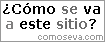
<style>
.page{position:relative;width:105px;height:42px;background:#ffffff}
.page>*{position:absolute;margin:0}
.t1{font:14px/15px "Verdana-Bold";color:#000000}
.t2{font:14px/15px "Verdana-Bold";color:#6c6c6c}
.t3{font:14px/15px "Verdana-Bold";color:#807f7f}
.t4{font:9px "Small Fonts";color:#999999}
</style>
<div class="page">
<p class="t1" style="left:3px;top:3px;width:97px;height:26px;text-align:center">¿Cómo <span class="t2">se </span>va<br><span class="t3">a </span>este <span class="t2">sitio</span>?</p>
<p class="t4" style="left:38px;top:35px;width:65px;height:5px">comoseva.com</p>
</div>
